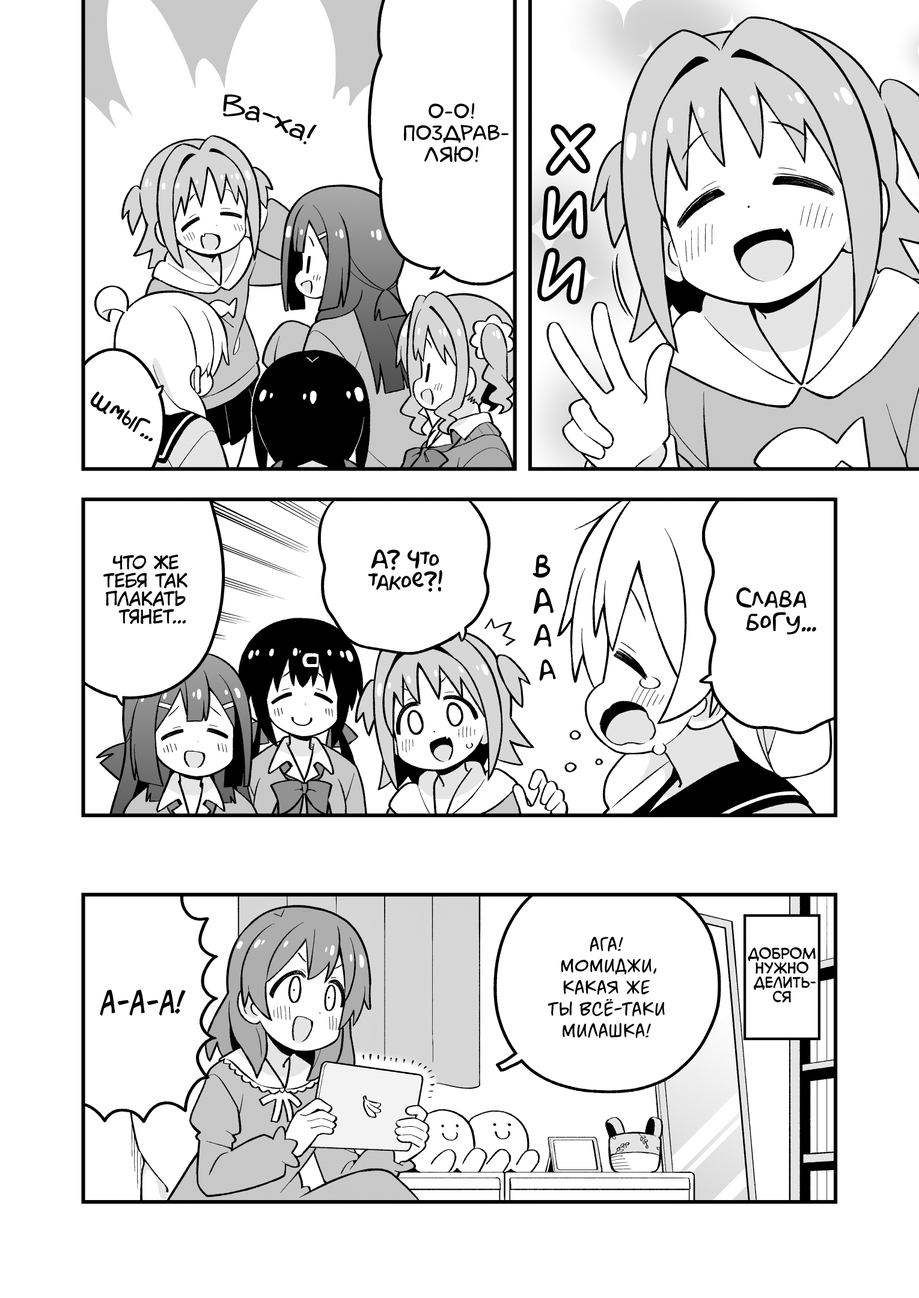
<style>
.page{position:relative;width:919px;height:1298px;background:#ffffff}
.page>*{position:absolute;margin:0}
.t1{font:28.8px "v_Augie";color:#000000}
.t2{font:21.6px "laCartoonerie";color:#000000;text-transform:uppercase}
.t3{font:64.9px "laCartoonerie";color:#ffffff;text-transform:uppercase}
.t4{font:21.6px "AkbarPlain";color:#000000}
.t5{font:18px "KuraiVoice2";color:#000000;text-transform:uppercase}
.t6{font:28.8px "AkbarPlain";color:#000000;text-transform:uppercase;scale:0.9 1}
.t7{font:23.4px "AkbarPlain";color:#000000}
.t8{font:25.2px "AkbarPlain";color:#000000;text-transform:uppercase;scale:0.9 1}
.t9{font:23.4px "AkbarPlain";color:#000000;text-transform:uppercase;scale:0.9 1}
.t10{font:21.6px "v_MangaMasterBB";color:#000000;text-transform:uppercase}
.t11{font:14.4px "v_CCMonologous";color:#000000;text-transform:uppercase}
.t12{font:28.8px "v_CCJeffCampbell";color:#000000;text-transform:uppercase}
</style>
<div class="page">
<p class="t1" style="left:223px;top:94px;width:94px;height:50px;rotate:19deg">Ва-ха!</p>
<p class="t2" style="left:404px;top:103px;width:104px;height:59px;text-align:center">О-о!<br>Поздрав-<br>ляю!</p>
<p class="t3" style="left:550px;top:127px;width:41px;height:45px;rotate:2deg">х</p>
<p class="t3" style="left:546px;top:190px;width:37px;height:46px;rotate:3deg">и</p>
<p class="t3" style="left:541px;top:252px;width:41px;height:48px;rotate:11deg">и</p>
<p class="t4" style="left:90px;top:391px;width:63px;height:51px;rotate:29deg">шмыг...</p>
<p class="t5" style="left:103px;top:555px;width:84px;height:69px;text-align:center">Что же<br>тебя так<br>плакать<br>тянет...</p>
<p class="t4" style="left:368px;top:549px;width:74px;height:43px;text-align:center">А? Что<br>такое?!</p>
<p class="t6" style="left:532px;top:555px;width:18px;height:23px;rotate:4deg">в</p>
<p class="t6" style="left:534px;top:588px;width:19px;height:26px;rotate:-4deg">а</p>
<p class="t7" style="left:736px;top:587px;width:80px;height:48px;text-align:center">Слава<br>богу...</p>
<p class="t8" style="left:534px;top:624px;width:18px;height:23px;rotate:2deg">а</p>
<p class="t9" style="left:539px;top:659px;width:17px;height:22px;rotate:-8deg">а</p>
<p class="t10" style="left:547px;top:937px;width:118px;height:101px;text-align:center">Ага!<br>Момиджи,<br>какая же<br>ты всё-таки<br>милашка!</p>
<p class="t11" style="left:747px;top:947px;width:69px;height:55px;text-align:center">Добром<br>нужно<br>делить-<br>ся</p>
<p class="t12" style="left:100px;top:990px;width:86px;height:25px">А-а-а!</p>
</div>
